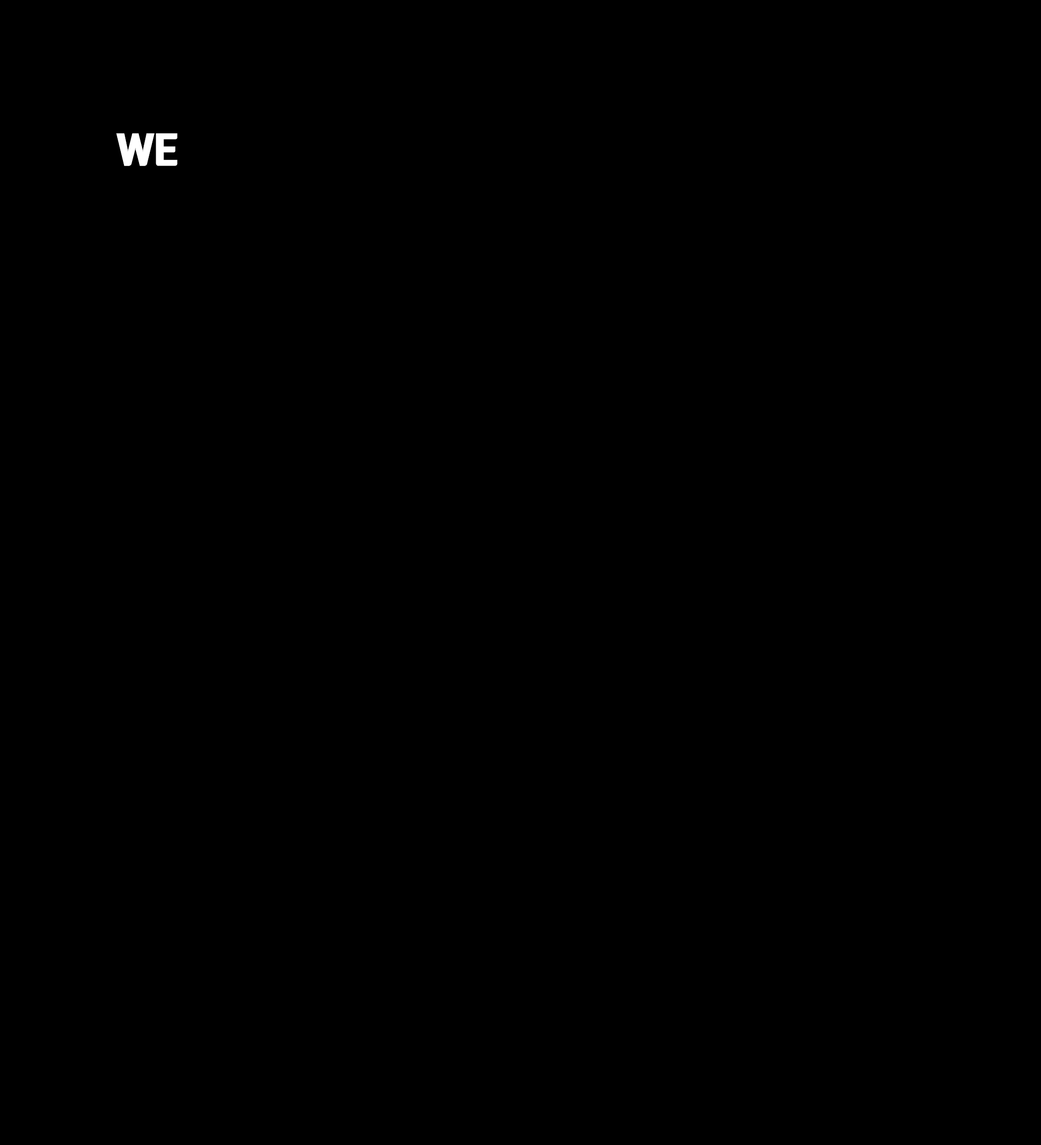
<style>
.page{position:relative;width:1041px;height:1145px;background:#000000}
.page>*{position:absolute;margin:0}
.t1{font:37.5px "TmonMonsoriBlack";color:#ffffff}
</style>
<div class="page">
<p class="t1" style="left:116px;top:133px;width:62px;height:33px">WE</p>
</div>
